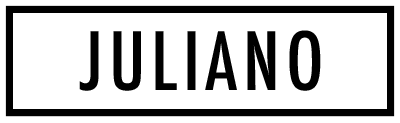
<style>
.page{position:relative;width:400px;height:123px;background:#ffffff}
.page>*{position:absolute;margin:0}
.t1{font:78px "Futura-CondensedMedium";letter-spacing:0.072em;color:#000000}
</style>
<div class="page">
<p class="t1" style="left:79px;top:30px;width:242px;height:61px">JULIANO</p>
</div>
